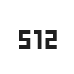
<style>
.page{position:relative;width:74px;height:74px;background:#ffffff}
.page>*{position:absolute;margin:0}
.t1{font:30px "04b24";color:#1f1f1f}
</style>
<div class="page">
<p class="t1" style="left:19px;top:30px;width:38px;height:19px">512</p>
</div>
